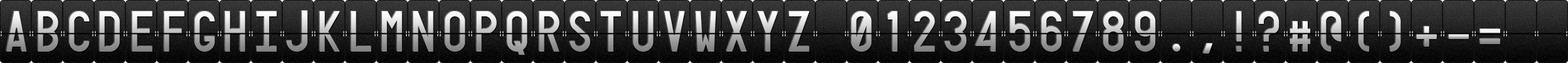
<style>
.page{position:relative;width:1568px;height:63px}
.page>*{position:absolute;margin:0}
.t1{font:50.2px "Targa"}
</style>
<div class="page">
<p class="t1" style="left:6px;top:11px;width:21px;height:40px">A</p>
<p class="t1" style="left:38px;top:11px;width:20px;height:40px">B</p>
<p class="t1" style="left:69px;top:11px;width:21px;height:40px">C</p>
<p class="t1" style="left:99px;top:11px;width:21px;height:40px">D</p>
<p class="t1" style="left:132px;top:11px;width:20px;height:40px">E</p>
<p class="t1" style="left:164px;top:11px;width:20px;height:40px">F</p>
<p class="t1" style="left:194px;top:11px;width:21px;height:40px">G</p>
<p class="t1" style="left:225px;top:11px;width:20px;height:40px">H</p>
<p class="t1" style="left:257px;top:11px;width:20px;height:40px">I</p>
<p class="t1" style="left:287px;top:11px;width:21px;height:40px">J</p>
<p class="t1" style="left:319px;top:11px;width:21px;height:40px">K</p>
<p class="t1" style="left:351px;top:11px;width:20px;height:40px">L</p>
<p class="t1" style="left:381px;top:11px;width:21px;height:40px">M</p>
<p class="t1" style="left:413px;top:11px;width:20px;height:40px">N</p>
<p class="t1" style="left:445px;top:11px;width:20px;height:40px">O</p>
<p class="t1" style="left:476px;top:11px;width:21px;height:40px">P</p>
<p class="t1" style="left:507px;top:11px;width:20px;height:50px">Q</p>
<p class="t1" style="left:539px;top:11px;width:20px;height:40px">R</p>
<p class="t1" style="left:569px;top:11px;width:21px;height:40px">S</p>
<p class="t1" style="left:601px;top:11px;width:20px;height:40px">T</p>
<p class="t1" style="left:633px;top:11px;width:21px;height:40px">U</p>
<p class="t1" style="left:664px;top:11px;width:21px;height:40px">V</p>
<p class="t1" style="left:696px;top:11px;width:20px;height:40px">W</p>
<p class="t1" style="left:726px;top:11px;width:21px;height:40px">X</p>
<p class="t1" style="left:758px;top:11px;width:20px;height:40px">Y</p>
<p class="t1" style="left:789px;top:11px;width:21px;height:40px">Z</p>
<p class="t1" style="left:851px;top:11px;width:21px;height:40px">0</p>
<p class="t1" style="left:887px;top:11px;width:11px;height:40px">1</p>
<p class="t1" style="left:914px;top:11px;width:21px;height:40px">2</p>
<p class="t1" style="left:945px;top:11px;width:22px;height:40px">3</p>
<p class="t1" style="left:975px;top:11px;width:21px;height:40px">4</p>
<p class="t1" style="left:1010px;top:11px;width:20px;height:40px">5</p>
<p class="t1" style="left:1041px;top:11px;width:21px;height:40px">6</p>
<p class="t1" style="left:1073px;top:11px;width:21px;height:40px">7</p>
<p class="t1" style="left:1103px;top:11px;width:21px;height:40px">8</p>
<p class="t1" style="left:1135px;top:11px;width:21px;height:40px">9</p>
<p class="t1" style="left:1236px;top:11px;width:6px;height:40px">!</p>
<p class="t1" style="left:1259px;top:11px;width:20px;height:40px">?</p>
<p class="t1" style="left:1321px;top:11px;width:21px;height:40px">@</p>
<p class="t1" style="left:1359px;top:11px;width:10px;height:40px">(</p>
<p class="t1" style="left:1390px;top:11px;width:11px;height:40px">)</p>
<p class="t1" style="left:1290px;top:21px;width:21px;height:30px">#</p>
<p class="t1" style="left:1416px;top:26px;width:21px;height:20px">+</p>
<p class="t1" style="left:1480px;top:29px;width:20px;height:15px">=</p>
<p class="t1" style="left:1448px;top:34px;width:21px;height:5px">-</p>
<p class="t1" style="left:1172px;top:44px;width:8px;height:7px">.</p>
<p class="t1" style="left:1203px;top:43px;width:9px;height:10px">,</p>
</div>
